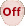
<style>
.page{position:relative;width:25px;height:26px}
.page>*{position:absolute;margin:0}
.t1{font:12px "LaoUI-Bold";color:#a5000c}
</style>
<div class="page">
<p class="t1" style="left:3px;top:7px;width:18px;height:9px">Off</p>
</div>
